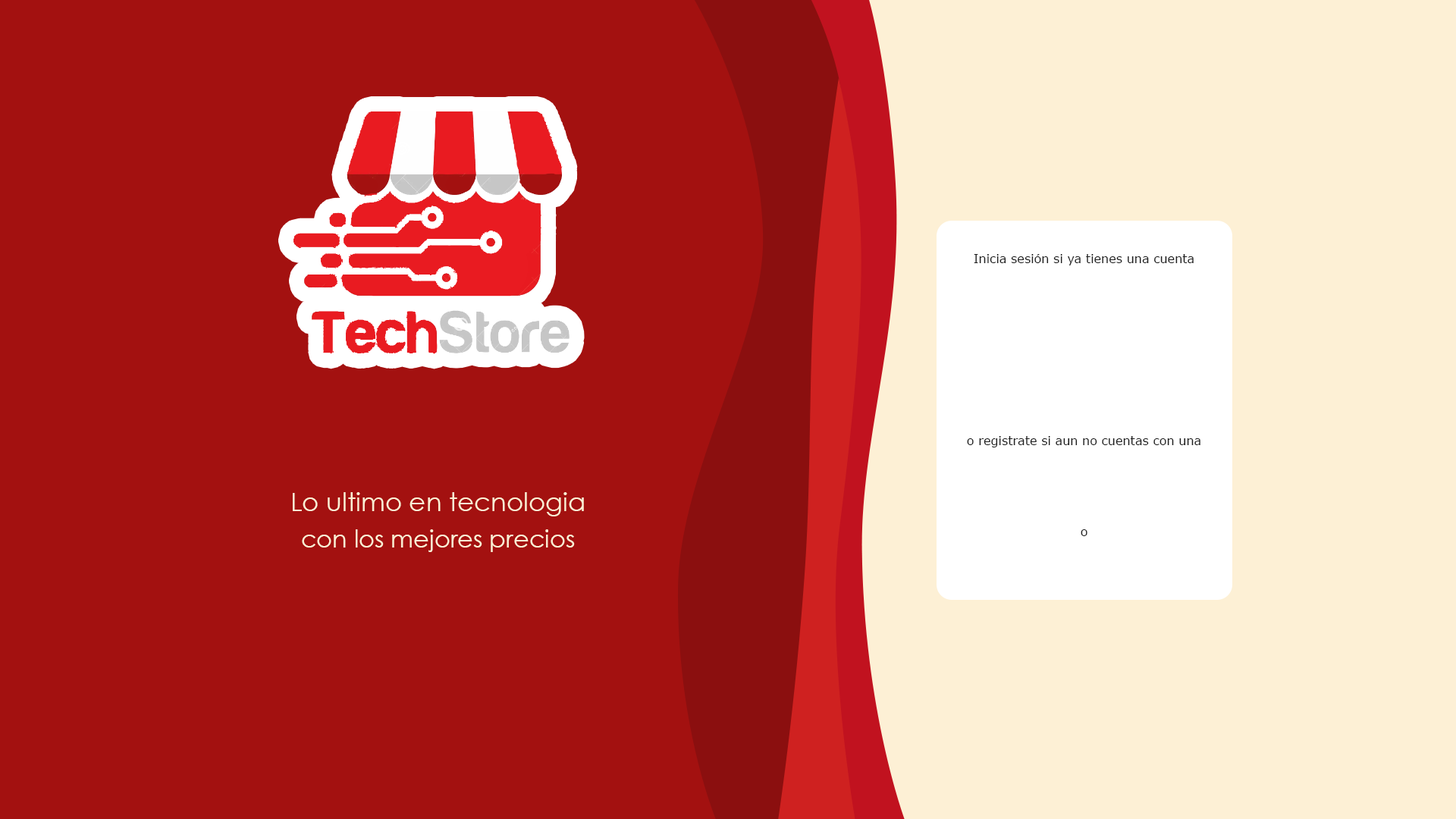
<style>
.page{position:relative;width:1456px;height:819px;background:#a31110}
.page>*{position:absolute;margin:0}
.t1{font:12.1px/18.2px "Verdana";color:#1f1f1f}
.t2{font:25.8px/18.2px "CenturyGothic";color:#fdf0d5}
.t3{font:24.3px/18.2px "CenturyGothic";color:#fdf0d5}
</style>
<div class="page">
<p class="t1" style="left:967px;top:254px;width:233px;height:282px;text-align:center">Inicia sesión si ya tienes una cuenta<br><br><br><br><br><br><br><br><br><br>o registrate si aun no cuentas con una<br><br><br><br><br>o</p>
<p class="t2" style="left:293px;top:492px;width:291px;height:60px;text-align:center">Lo ultimo en tecnologia<br> <br><span class="t3">con los mejores precios</span></p>
</div>
